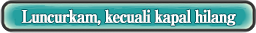
<style>
.page{position:relative;width:256px;height:33px}
.page>*{position:absolute;margin:0}
.t1{font:17px "RyuminPro-ExBold";letter-spacing:-0.08em;color:#ffffff;font-weight:bold;scale:0.9 1}
</style>
<div class="page">
<p class="t1" style="left:21px;top:9px;width:215px;height:17px">Luncurkam, kecuali kapal hilang</p>
</div>
